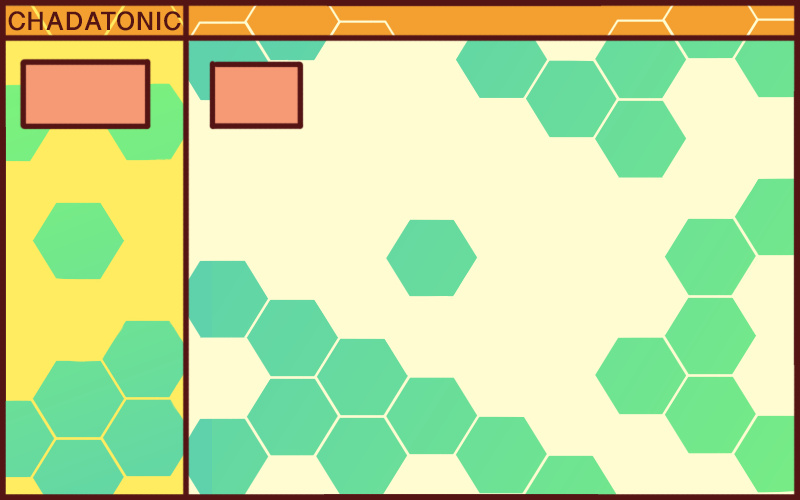
<style>
.page{position:relative;width:800px;height:500px;background:#fffcd1}
.page>*{position:absolute;margin:0}
.t1{font:23px "OriyaSangamMN-Bold";color:#541414}
</style>
<div class="page">
<p class="t1" style="left:8px;top:11px;width:173px;height:20px">CHADATONIC</p>
</div>
